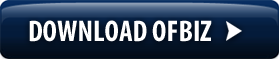
<style>
.page{position:relative;width:279px;height:59px}
.page>*{position:absolute;margin:0}
.t1{font:30px "MyriadPro-BoldCond";color:#ffffff}
</style>
<div class="page">
<p class="t1" style="left:29px;top:20px;width:183px;height:22px">DOWNLOAD OFBIZ</p>
</div>
